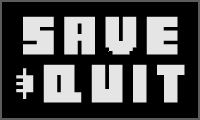
<style>
.page{position:relative;width:200px;height:120px;background:#000000}
.page>*{position:absolute;margin:0}
.t1{font:55px/48px "Blocked";color:#000000}
</style>
<div class="page">
<p class="t1" style="left:12px;top:13px;width:176px;height:93px;text-align:center">save<br>&amp;quit</p>
</div>
